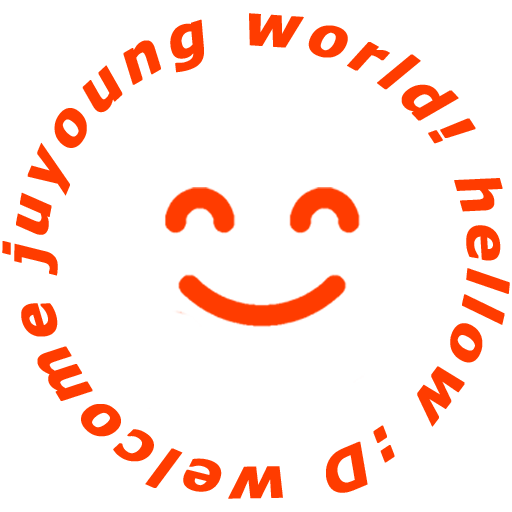
<style>
.page{position:relative;width:512px;height:512px;background:#ffffff}
.page>*{position:absolute;margin:0}
.t1{font:56.6px "Verdana-BoldItalic";letter-spacing:0.08em;color:#ff3c00;font-weight:bold}
</style>
<div class="page">
<p class="t1" style="left:2px;top:13px;width:508px;height:486px;text-align:center">hellow :D welcome juyoung world!</p>
</div>
